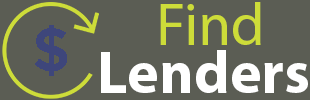
<style>
.page{position:relative;width:310px;height:100px;background:#5b5d54}
.page>*{position:absolute;margin:0}
.t1{font:60px "MyriadPro-Regular";color:#cddc39}
.t2{font:60px "MyriadPro-Bold";color:#ffffff}
.t3{font:60px "MyriadPro-Regular";color:#ffffff}
</style>
<div class="page">
<p class="t1" style="left:160px;top:2px;width:101px;height:43px">Find</p>
<p class="t2" style="left:101px;top:50px;width:207px;height:43px">Lenders<br><span class="t3">Lenders</span></p>
</div>
